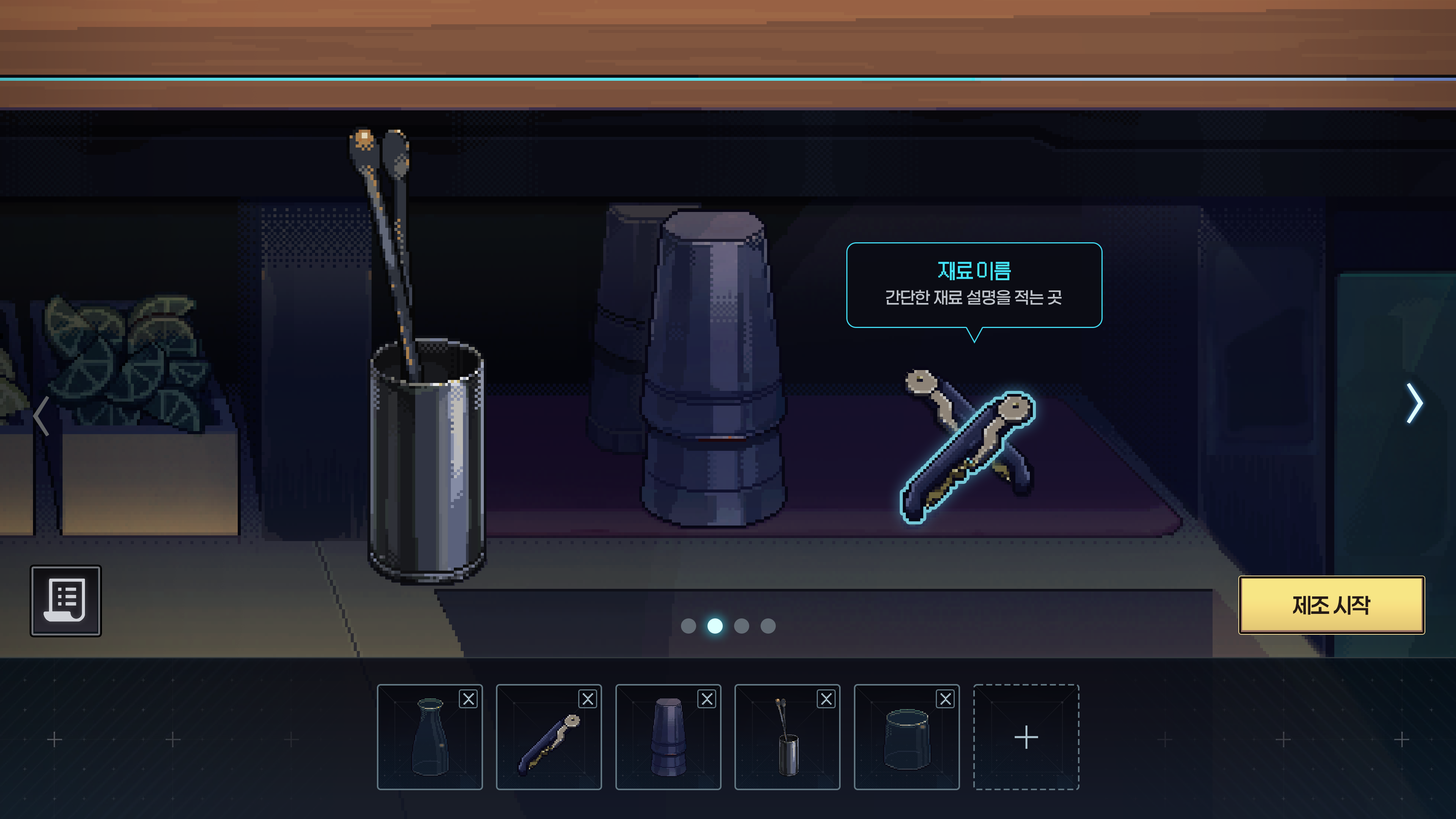
<style>
.page{position:relative;width:1456px;height:819px}
.page>*{position:absolute;margin:0}
.t1{font:21.2px "PF½ºÅ¸´õ½ºÆ® Bold";letter-spacing:-0.01em;color:#44e5fd}
.t2{font:17px "Paperlogy-5Medium";letter-spacing:-0.01em;color:#bdc2c9}
.t3{font:45.9px "SDJebib-cMd";letter-spacing:-0.05em;color:#dcfffe}
.t4{font:45.9px "SDJebib-cMd";letter-spacing:-0.05em;color:#616365}
.t5{font:22.1px "Paperlogy-6SemiBold";letter-spacing:-0.05em;color:#251a16}
.t6{font:15px "PF½ºÅ¸´õ½ºÆ® Bold";color:#afc5d0;text-transform:uppercase}
.t7{font:56.7px "Pretendard-Thin";color:#afc5d0;text-transform:uppercase}
</style>
<div class="page">
<p class="t1" style="left:938px;top:262px;width:73px;height:19px">재료 이름</p>
<p class="t2" style="left:886px;top:290px;width:176px;height:15px">간단한 재료 설명을 적는 곳</p>
<p class="t3" style="left:1407px;top:383px;width:16px;height:40px">&gt;</p>
<p class="t4" style="left:33px;top:396px;width:16px;height:40px;rotate:180deg">&gt;</p>
<p class="t5" style="left:1293px;top:596px;width:78px;height:19px">제조 시작</p>
<p class="t6" style="left:463px;top:693px;width:11px;height:12px">X</p>
<p class="t6" style="left:583px;top:693px;width:10px;height:12px">X</p>
<p class="t6" style="left:702px;top:693px;width:10px;height:12px">X</p>
<p class="t6" style="left:821px;top:693px;width:11px;height:12px">X</p>
<p class="t6" style="left:940px;top:693px;width:11px;height:12px">X</p>
<p class="t7" style="left:1015px;top:725px;width:23px;height:24px">+</p>
</div>
